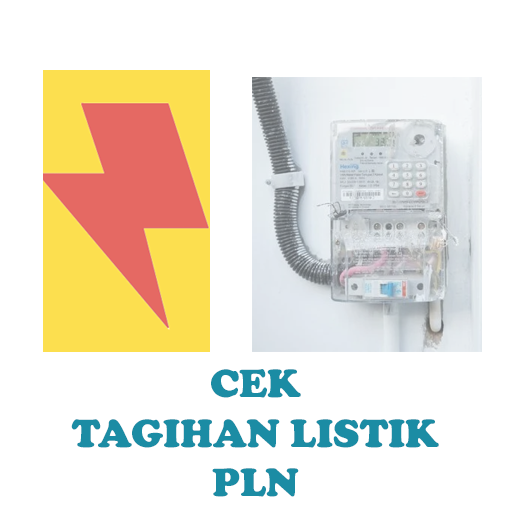
<style>
.page{position:relative;width:512px;height:512px;background:#ffffff}
.page>*{position:absolute;margin:0}
.t1{font:41.1px "CooperBlack";color:#1b8ca4}
</style>
<div class="page">
<p class="t1" style="left:71px;top:369px;width:368px;height:128px;text-align:center">CEK<br>TAGIHAN LISTIK<br>PLN</p>
</div>
